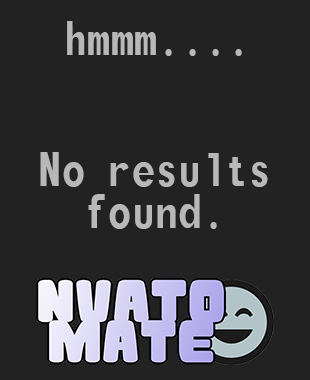
<style>
.page{position:relative;width:310px;height:380px;background:#222222}
.page>*{position:absolute;margin:0}
.t1{font:58.4px "Monofonto";color:#b8b8b8}
.t2{font:58.4px/41.7px "Monofonto";color:#b8b8b8}
</style>
<div class="page">
<p class="t1" style="left:67px;top:21px;width:175px;height:35px">hmmm....</p>
<p class="t2" style="left:40px;top:152px;width:228px;height:77px;text-align:center">No results<br>found.</p>
</div>
